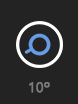
<style>
.page{position:relative;width:78px;height:104px;background:#232323}
.page>*{position:absolute;margin:0}
.t1{font:14px "SegoeUI";color:#7c7c7c;font-weight:bold}
</style>
<div class="page">
<p class="t1" style="left:29px;top:82px;width:21px;height:11px">10º</p>
</div>
